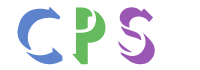
<style>
.page{position:relative;width:200px;height:70px;background:#ffffff}
.page>*{position:absolute;margin:0}
.t1{font:60px "VNI-Shadow";color:#5e83cd}
.t2{font:60px "VNI-Shadow";color:#65ba5d}
.t3{font:60px "VNI-Shadow";color:#9b57b4}
</style>
<div class="page">
<p class="t1" style="left:17px;top:6px;width:46px;height:59px">c</p>
<p class="t2" style="left:72px;top:7px;width:34px;height:58px">P</p>
<p class="t3" style="left:118px;top:7px;width:37px;height:58px">S</p>
</div>
